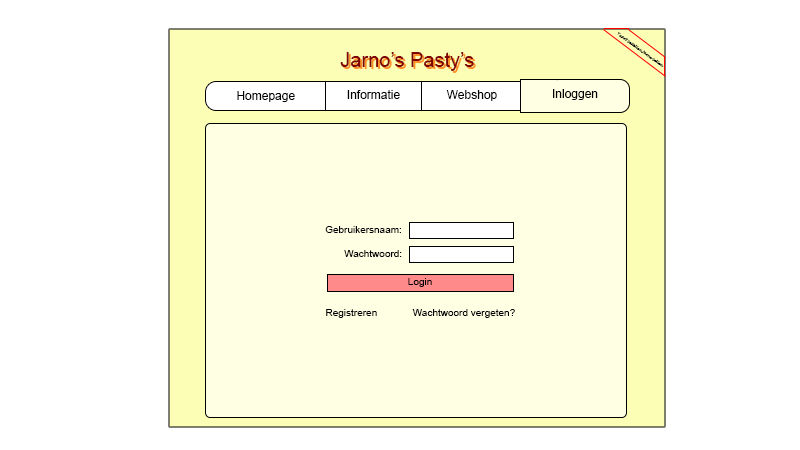
<style>
.page{position:relative;width:800px;height:450px;background:#ffffff}
.page>*{position:absolute;margin:0}
.t1{font:3.5px "LucidaHandwriting-Italic";color:#000000}
.t2{font:20px "ArialMT";color:#7f0303}
.t3{font:20px "ArialMT";color:#ff9227}
.t4{font:12px "ArialMT";color:#000000}
.t5{font:10px "ArialMT";color:#000000}
</style>
<div class="page">
<p class="t1" style="left:617px;top:32px;width:47px;height:35px;rotate:36deg">Taart bestellen Jarno bellen</p>
<p class="t2" style="left:340px;top:52px;width:134px;height:19px">Jarno’s Pasty’s</p>
<p class="t3" style="left:342px;top:54px;width:134px;height:19px">Jarno’s Pasty’s</p>
<p class="t4" style="left:553px;top:89px;width:45px;height:11px">Inloggen</p>
<p class="t4" style="left:237px;top:91px;width:58px;height:11px">Homepage</p>
<p class="t4" style="left:347px;top:90px;width:53px;height:9px">Informatie</p>
<p class="t4" style="left:446px;top:90px;width:51px;height:11px">Webshop</p>
<p class="t5" style="left:325px;top:226px;width:76px;height:7px">:Gebruikersnaam</p>
<p class="t5" style="left:344px;top:250px;width:58px;height:7px">:Wachtwoord</p>
<p class="t5" style="left:408px;top:278px;width:24px;height:9px">Login</p>
<p class="t5" style="left:326px;top:309px;width:51px;height:9px">Registreren</p>
<p class="t5" style="left:412px;top:309px;width:103px;height:9px">?Wachtwoord vergeten</p>
</div>
